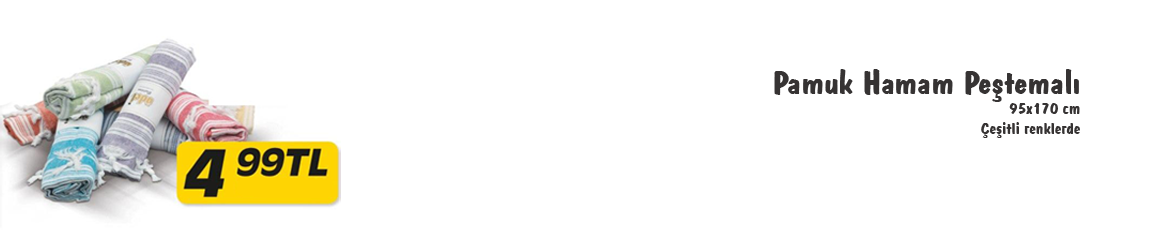
<style>
.page{position:relative;width:1150px;height:230px;background:#ffffff}
.page>*{position:absolute;margin:0}
.t1{font:16.6px "DomBoldBT-Regular";color:#363333;scale:1.07 1}
.t2{font:33.1px "DomBoldBT-Regular";color:#363333;scale:1.07 1}
</style>
<div class="page">
<p class="t1" style="left:774px;top:69px;width:306px;height:69px;text-align:right"><span class="t2">Pamuk Hamam Peştemalı<br></span>95x170 cm<br>Çeşitli renklerde</p>
</div>
